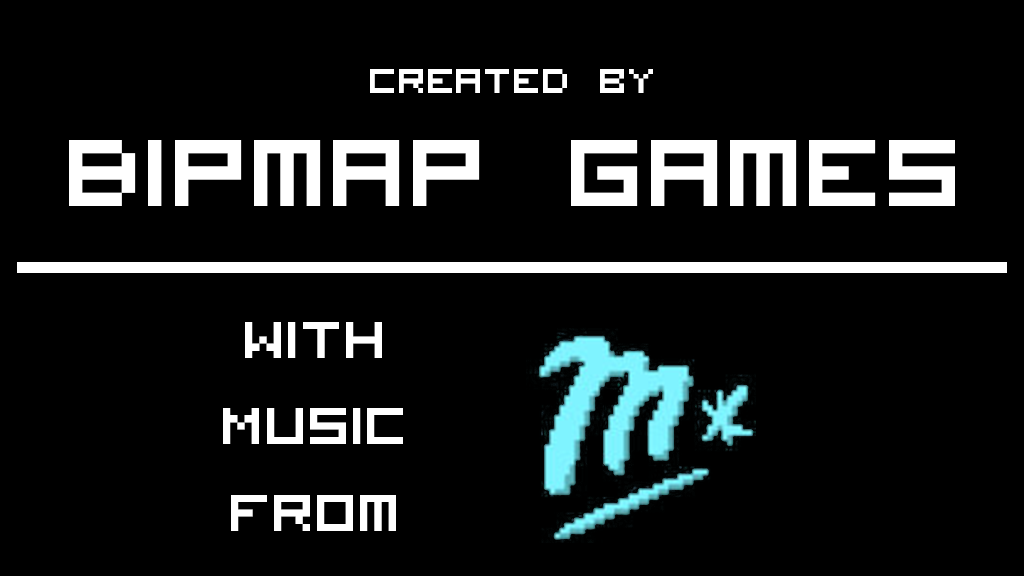
<style>
.page{position:relative;width:1024px;height:576px;background:#000000}
.page>*{position:absolute;margin:0}
.t1{font:48px "VisitorTT1BRK";color:#ffffff}
.t2{font:131.6px "VisitorTT1BRK";color:#ffffff}
.t3{font:72px "VisitorTT1BRK";color:#ffffff}
</style>
<div class="page">
<p class="t1" style="left:370px;top:69px;width:283px;height:24px">Created by</p>
<p class="t2" style="left:69px;top:140px;width:886px;height:66px">Bipmap Games</p>
<p class="t3" style="left:223px;top:322px;width:180px;height:209px;text-align:center">With<br>Music<br>From</p>
</div>
